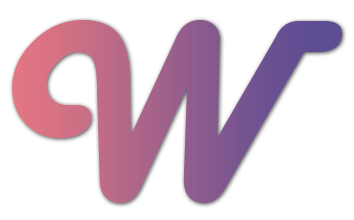
<style>
.page{position:relative;width:354px;height:220px;background:#ffffff}
.page>*{position:absolute;margin:0}
.t1{font:262.3px "HarlowSolid"}
</style>
<div class="page">
<p class="t1" style="left:12px;top:20px;width:330px;height:183px">W</p>
</div>
